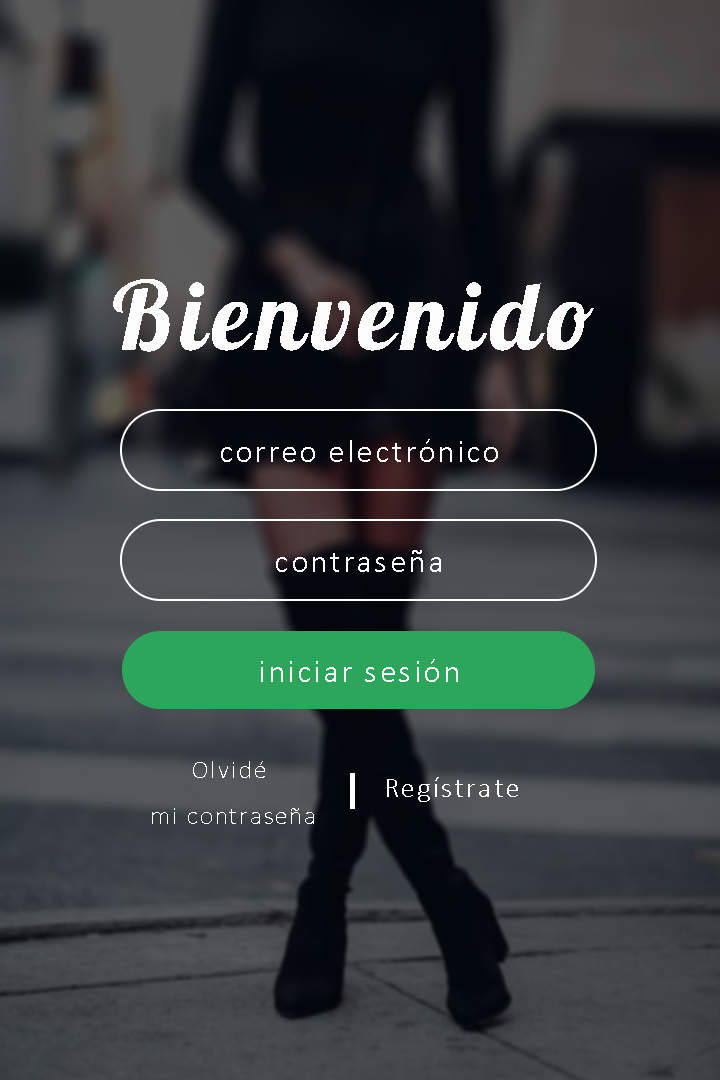
<style>
.page{position:relative;width:720px;height:1080px}
.page>*{position:absolute;margin:0}
.t1{font:95.4px "Lobster-Regular";letter-spacing:0.075em;color:#fdfdfd}
.t2{font:33.3px "Calibri-Light";letter-spacing:0.075em;color:#fdfdfd}
.t3{font:25px/45.8px "Calibri-Light";letter-spacing:0.075em;color:#fdfdfd}
.t4{font:29.2px "Calibri-Light";letter-spacing:0.075em;color:#fdfdfd}
</style>
<div class="page">
<p class="t1" style="left:113px;top:279px;width:481px;height:73px">Bienvenido</p>
<p class="t2" style="left:221px;top:439px;width:277px;height:23px">correo electrónico</p>
<p class="t2" style="left:276px;top:550px;width:165px;height:22px">contraseña</p>
<p class="t2" style="left:261px;top:659px;width:197px;height:23px">iniciar sesión</p>
<p class="t3" style="left:152px;top:761px;width:162px;height:63px;text-align:center">Olvidé<br> mi contraseña</p>
<p class="t4" style="left:387px;top:777px;width:131px;height:25px">Regístrate</p>
</div>
